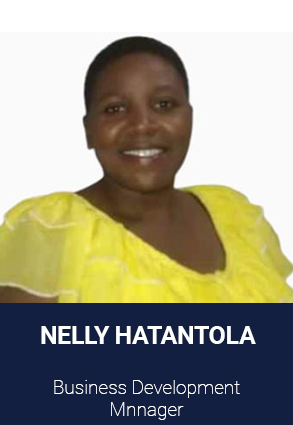
<style>
.page{position:relative;width:293px;height:425px;background:#121f40}
.page>*{position:absolute;margin:0}
.t1{font:24.7px "Roboto-Bold";letter-spacing:-0.01em;color:#ffffff}
.t2{font:19.5px/22px "Roboto-Thin";letter-spacing:-0.01em;color:#ffffff}
</style>
<div class="page">
<p class="t1" style="left:41px;top:326px;width:215px;height:18px">NELLY HATANTOLA</p>
<p class="t2" style="left:54px;top:380px;width:186px;height:40px;text-align:center">Business Development<br>Mnnager</p>
</div>
